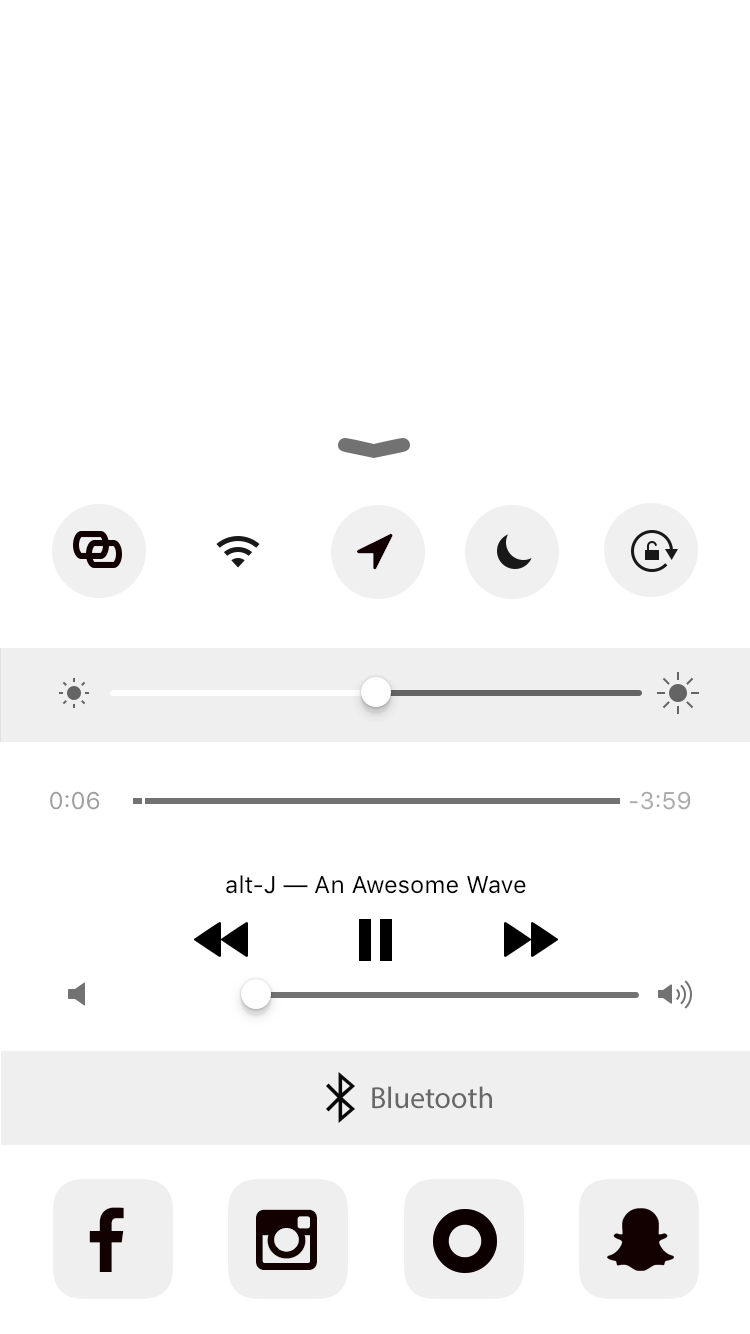
<style>
.page{position:relative;width:750px;height:1334px;background:#ffffff}
.page>*{position:absolute;margin:0}
.t1{font:24px "SFUIText-Regular";color:#9e9e9e}
.t2{font:24px "SFUIText-Regular";color:#a9a9a9}
.t3{font:24px "SFUIText-Regular";color:#000000}
.t4{font:30.4px "MyriadPro-Regular";color:#676767}
</style>
<div class="page">
<p class="t1" style="left:50px;top:791px;width:50px;height:19px">0:06</p>
<p class="t2" style="left:629px;top:791px;width:62px;height:19px">-3:59</p>
<p class="t3" style="left:226px;top:875px;width:300px;height:19px">alt-J ­— An Awesome Wave</p>
<p class="t4" style="left:372px;top:1086px;width:120px;height:23px">Bluetooth</p>
</div>
